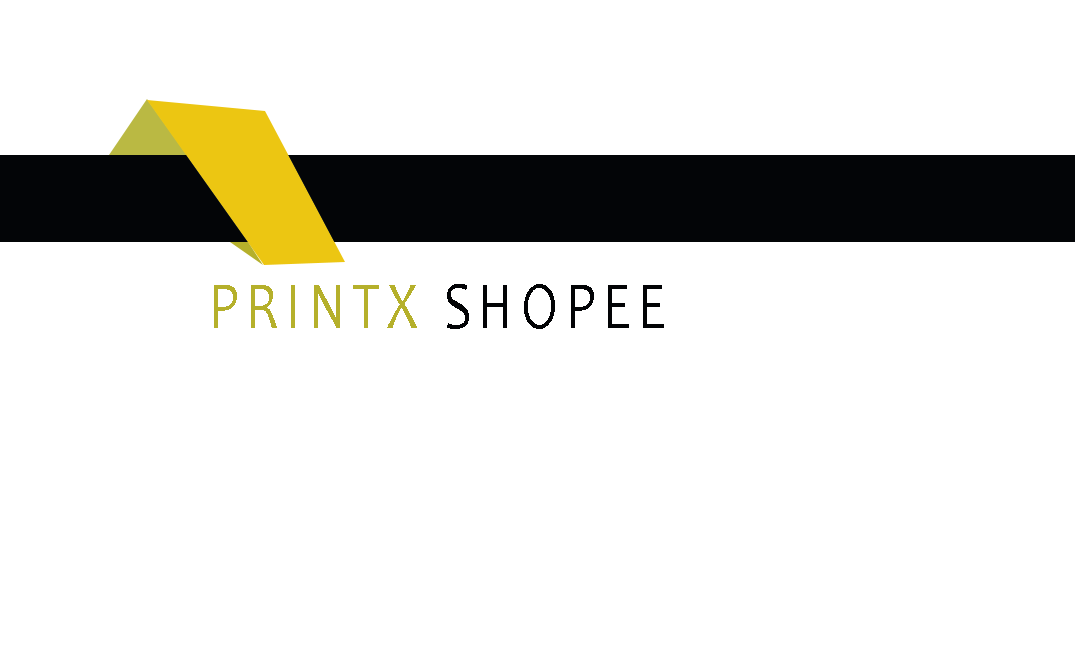
<style>
.page{position:relative;width:1075px;height:650px;background:#ffffff}
.page>*{position:absolute;margin:0}
.t1{font:68px "Candara";letter-spacing:0.135em;color:#b5b02b;scale:0.79 1}
.t2{font:68px "Candara";letter-spacing:0.135em;color:#020305;scale:0.79 1}
</style>
<div class="page">
<p class="t1" style="left:214px;top:284px;width:450px;height:45px">PRINTX <span class="t2">SHOPEE</span></p>
</div>
